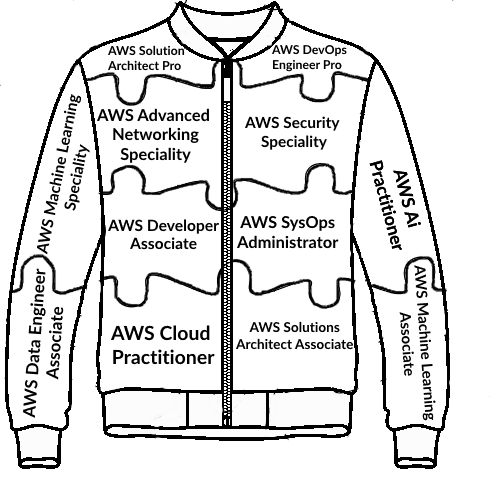
<style>
.page{position:relative;width:490px;height:477px;background:#ffffff}
.page>*{position:absolute;margin:0}
.t1{font:12.4px "Lato-Bold";color:#000000}
.t2{font:12.3px "Lato-Bold";color:#000000}
.t3{font:15.6px "Lato-Bold";color:#000000}
.t4{font:16.5px "Lato-Bold";color:#000000}
.t5{font:15.4px "Lato-Bold";color:#000000}
.t6{font:17.6px "Lato-Bold";color:#000000}
.t7{font:17px "Lato-Bold";color:#000000}
.t8{font:15px "Lato-Bold";color:#000000}
.t9{font:19.5px "Lato-Bold";color:#000000}
.t10{font:13.6px "Lato-Bold";color:#000000}
</style>
<div class="page">
<p class="t1" style="left:107px;top:45px;width:78px;height:26px">AWS Solution<br>Architect Pro</p>
<p class="t2" style="left:271px;top:45px;width:76px;height:27px">AWS DevOps<br>Engineer Pro</p>
<p class="t3" style="left:36px;top:94px;width:54px;height:161px;text-align:center;rotate:-79deg">AWS Machine Learning<br>Speciality</p>
<p class="t4" style="left:96px;top:108px;width:113px;height:55px;text-align:center">AWS Advanced <br>Networking<br>Speciality</p>
<p class="t5" style="left:244px;top:116px;width:96px;height:34px;text-align:center">AWS Security <br>Speciality</p>
<p class="t6" style="left:369px;top:160px;width:52px;height:90px;text-align:center;rotate:75deg">AWS Ai<br> Practitioner</p>
<p class="t6" style="left:369px;top:160px;width:52px;height:90px;text-align:center;rotate:75deg">AWS Ai<br> Practitioner</p>
<p class="t3" style="left:107px;top:219px;width:112px;height:31px;text-align:center">AWS Developer<br>Associate</p>
<p class="t4" style="left:236px;top:215px;width:103px;height:34px;text-align:center">AWS SysOps<br>Administrator</p>
<p class="t7" style="left:22px;top:268px;width:42px;height:150px;text-align:center;rotate:-86deg">AWS Data Engineer <br>Associate</p>
<p class="t8" style="left:399px;top:265px;width:37px;height:156px;text-align:center;rotate:86deg">AWS Machine Learning<br>Associate</p>
<p class="t9" style="left:110px;top:325px;width:105px;height:40px;text-align:center">AWS Cloud<br> Practitioner</p>
<p class="t10" style="left:235px;top:321px;width:118px;height:29px;text-align:center">AWS Solutions<br>Architect Associate</p>
</div>
